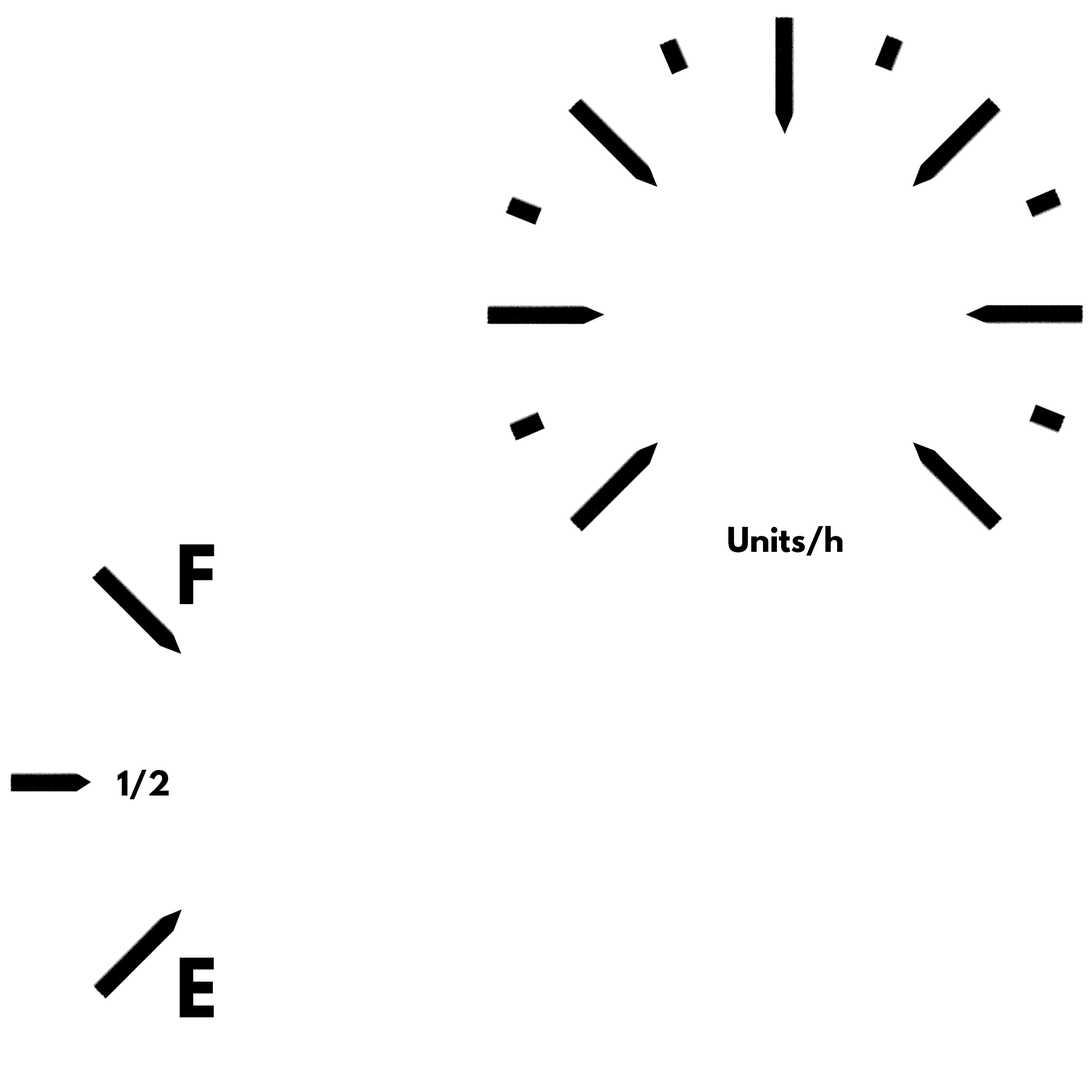
<style>
.page{position:relative;width:1092px;height:1092px;background:#ffffff}
.page>*{position:absolute;margin:0}
.t1{font:30.2px "LeagueSpartan-Bold";color:#000000}
.t2{font:72.2px "LeagueSpartan-Bold";color:#000000;text-transform:uppercase}
.t3{font:30.2px "LeagueSpartan-Bold";color:#000000;text-transform:uppercase}
</style>
<div class="page">
<p class="t1" style="left:728px;top:526px;width:114px;height:30px">Units/h</p>
<p class="t2" style="left:180px;top:544px;width:34px;height:60px">F</p>
<p class="t3" style="left:117px;top:769px;width:52px;height:30px">1/2</p>
<p class="t2" style="left:180px;top:958px;width:34px;height:59px">E</p>
</div>
